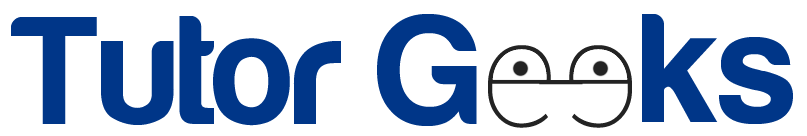
<style>
.page{position:relative;width:807px;height:136px;background:#ffffff}
.page>*{position:absolute;margin:0}
.t1{font:160px "Harabara";color:#003688}
.t2{font:150px "Roboto-Thin";color:#232323}
</style>
<div class="page">
<p class="t1" style="left:11px;top:14px;width:466px;height:112px">Tutor G</p>
<p class="t1" style="left:642px;top:14px;width:151px;height:110px">ks</p>
<p class="t2" style="left:539px;top:80px;width:44px;height:5px">-</p>
</div>
